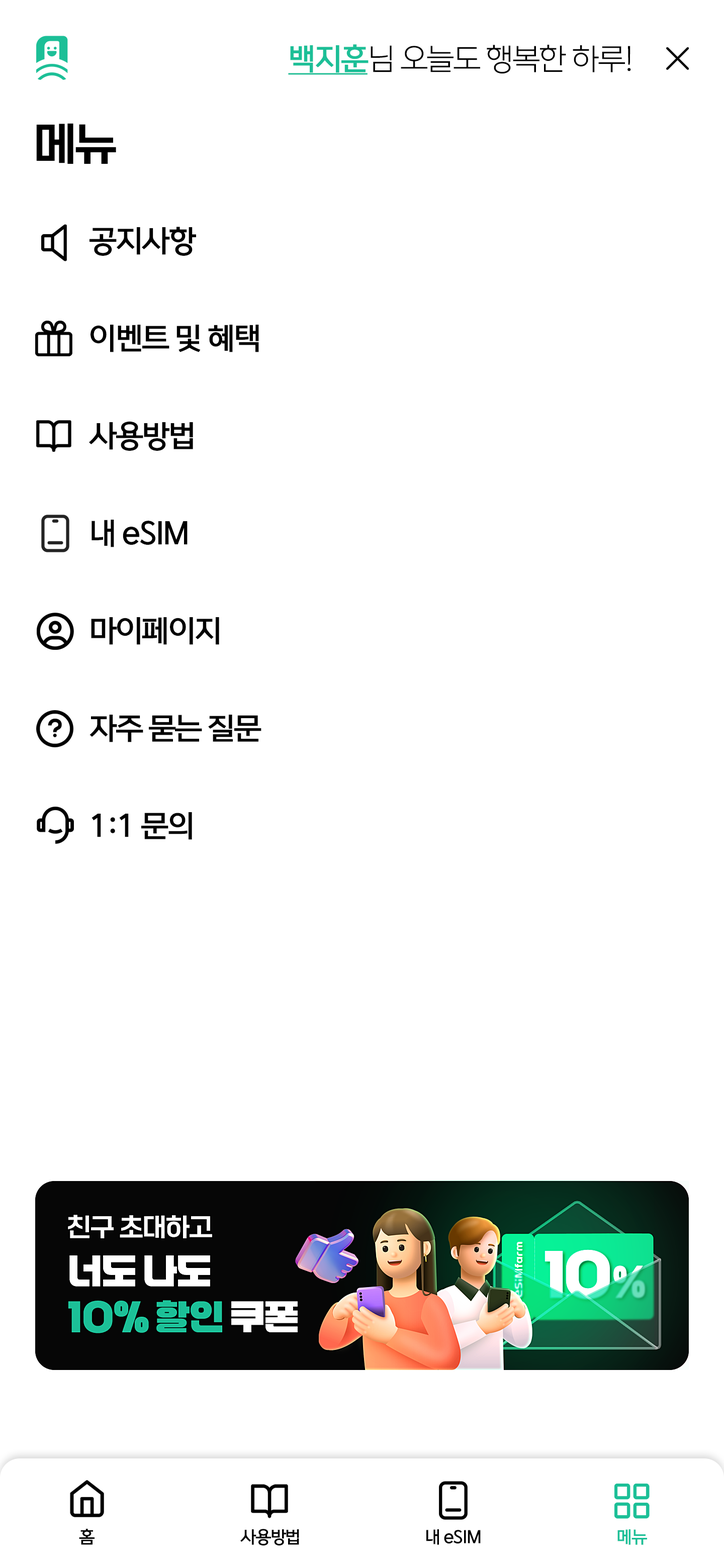
<style>
.page{position:relative;width:724px;height:1568px;background:#ffffff}
.page>*{position:absolute;margin:0}
.t1{font:30.2px "ONEMobileOTFLight";letter-spacing:-0.05em;color:#000000}
.t2{font:30.2px "ONEMobileOTFBold";letter-spacing:-0.05em;color:#1cbf97;text-decoration:underline}
.t3{font:45.2px "ONEMobileTitleOTFRegular";letter-spacing:-0.05em;color:#000000}
.t4{font:30.2px/97.5px "ONEMobileOTFBold";letter-spacing:-0.05em;color:#000000}
.t5{font:17.1px "ONEMobileOTFBold";letter-spacing:-0.05em;color:#000000}
.t6{font:17.1px "ONEMobileOTFBold";letter-spacing:-0.05em;color:#1cbf97}
</style>
<div class="page">
<p class="t1" style="left:288px;top:44px;width:343px;height:31px"><span class="t2">백지훈</span>님 오늘도 행복한 하루!</p>
<p class="t3" style="left:36px;top:123px;width:80px;height:41px">메뉴</p>
<p class="t4" style="left:89px;top:227px;width:172px;height:613px">공지사항<br>이벤트 및 혜택<br>사용방법<br>내 eSIM<br>마이페이지<br>자주 묻는 질문<br>1:1 문의</p>
<p class="t5" style="left:79px;top:1529px;width:15px;height:16px">홈</p>
<p class="t5" style="left:240px;top:1529px;width:59px;height:17px">사용방법</p>
<p class="t5" style="left:426px;top:1529px;width:54px;height:16px">내 eSIM</p>
<p class="t6" style="left:617px;top:1529px;width:30px;height:16px">메뉴</p>
</div>
